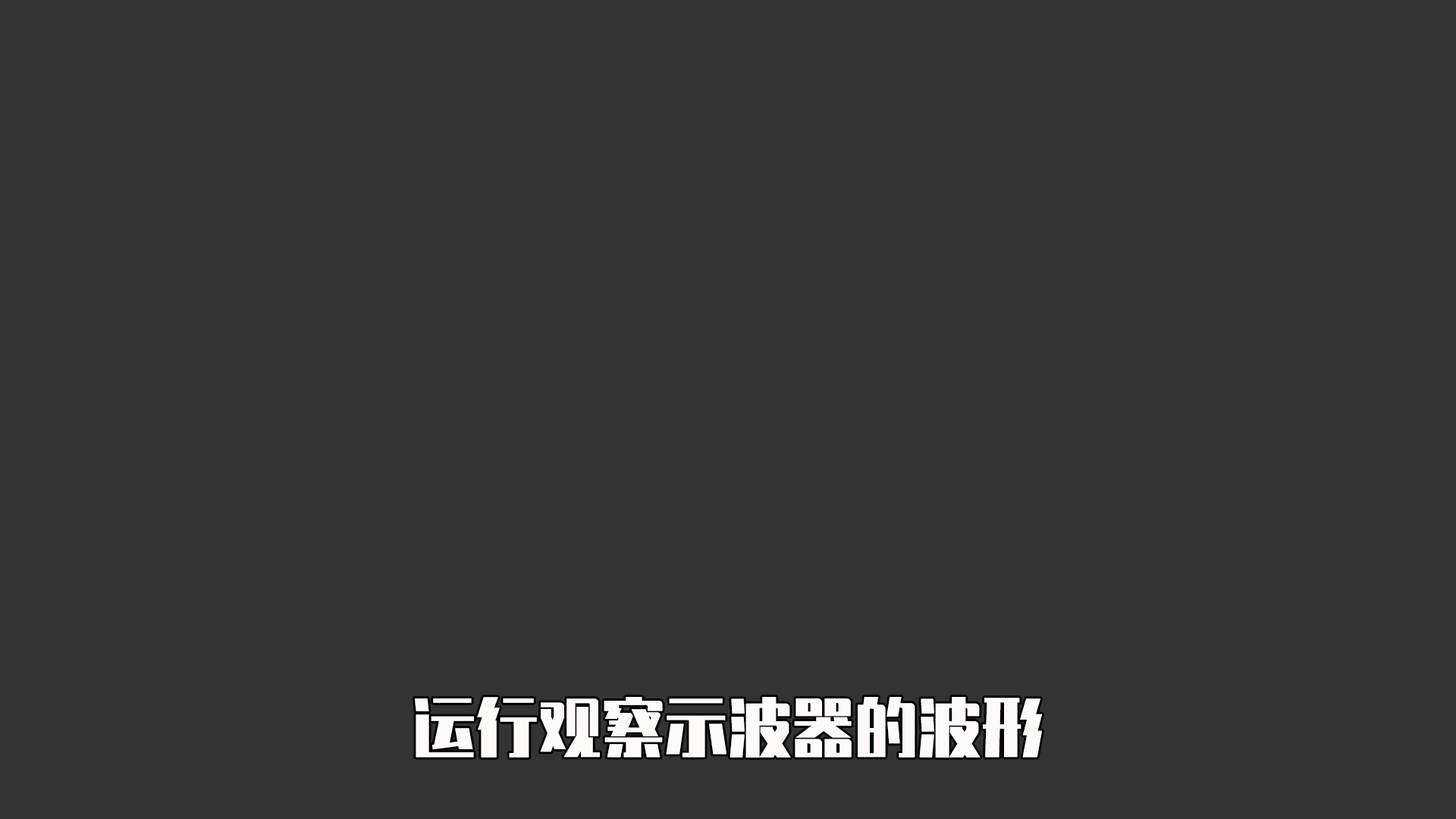
<style>
.page{position:relative;width:1456px;height:819px;background:#333333}
.page>*{position:absolute;margin:0}
.t1{font:63.2px "ZhenyanGB-Regular";color:#fefafa}
</style>
<div class="page">
<p class="t1" style="left:415px;top:697px;width:627px;height:61px">运行观察示波器的波形</p>
</div>
